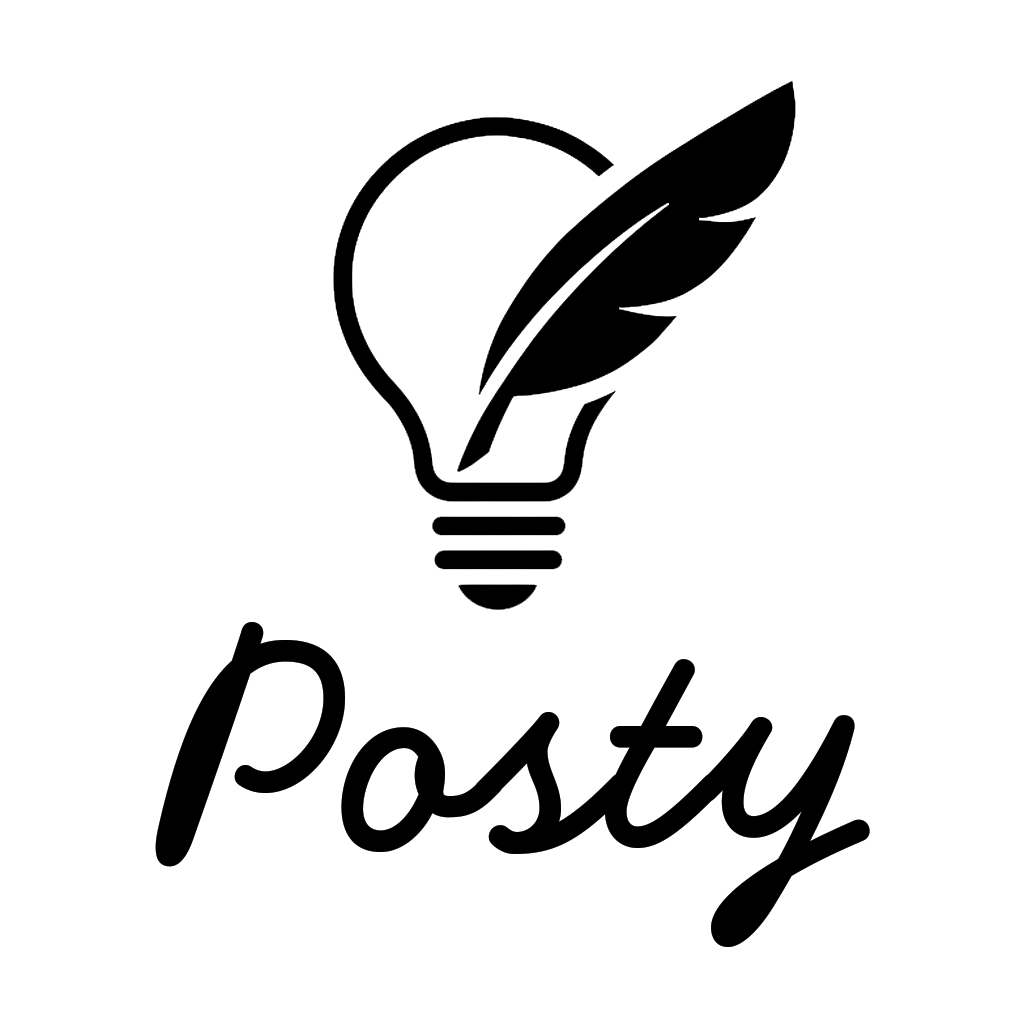
<style>
.page{position:relative;width:1024px;height:1024px;background:#ffffff}
.page>*{position:absolute;margin:0}
.t1{font:359.3px "HandsomePro-Bold";color:#000000}
</style>
<div class="page">
<p class="t1" style="left:155px;top:622px;width:715px;height:325px">Posty</p>
</div>
